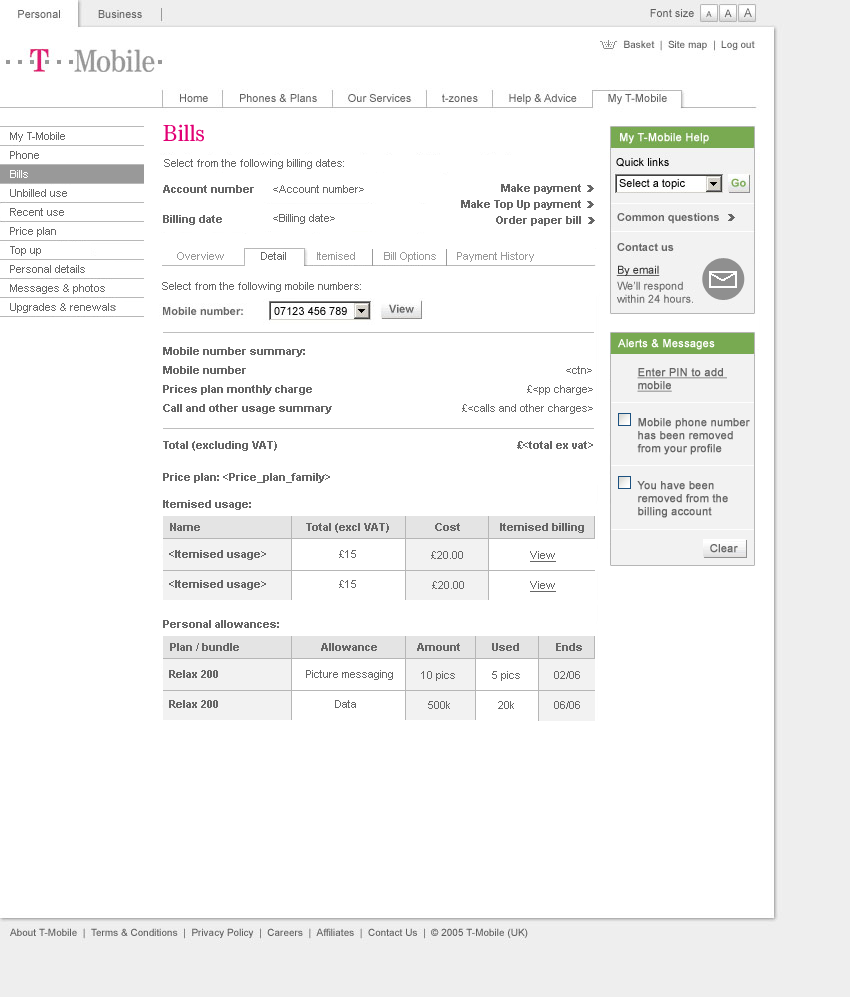
<style>
.page{position:relative;width:850px;height:997px;background:#ffffff}
.page>*{position:absolute;margin:0}
.t1{font:24px "Tele-Antiqua";color:#e20074}
.t2{font:11px/19px "ArialMT";color:#666666}
.t3{font:11px/19px "ArialMT";color:#ffffff}
.t4{font:11px/19px "ArialMT";color:#8f8f8f;font-weight:bold}
.t5{font:11px "ArialMT";color:#666666}
.t6{font:11px "Arial-BoldMT";color:#666666}
.t7{font:11px "ArialMT";color:#999999}
.t8{font:11px "ArialMT";color:#ffffff;font-weight:bold}
.t9{font:11px/19px "Arial-BoldMT";color:#666666}
.t10{font:11px "ArialMT";color:#666666;font-weight:bold;text-decoration:underline}
.t11{font:11px "ArialMT";color:#666666;font-weight:bold}
.t12{font:11px "ArialMT";color:#666666;text-decoration:underline}
</style>
<div class="page">
<p class="t1" style="left:163px;top:124px;width:41px;height:18px">Bills</p>
<p class="t2" style="left:10px;top:132px;width:106px;height:181px">My T-Mobile<br>Phone<br><span class="t3">Bills<br></span>Unbilled use<br>Recent use<br>Price plan<br>Top up<br>Personal details<br>Messages &amp; photos<br>Upgrades &amp; renewal<span class="t4">s</span></p>
<p class="t5" style="left:164px;top:159px;width:180px;height:10px">Select from the following billing dates:</p>
<p class="t6" style="left:163px;top:185px;width:91px;height:8px">Account number</p>
<p class="t5" style="left:273px;top:185px;width:91px;height:8px">&lt;Account number&gt;</p>
<p class="t6" style="left:501px;top:184px;width:80px;height:10px">Make payment</p>
<p class="t6" style="left:461px;top:200px;width:120px;height:10px">Make Top Up payment</p>
<p class="t6" style="left:163px;top:215px;width:59px;height:10px">Billing date</p>
<p class="t5" style="left:273px;top:214px;width:62px;height:10px">&lt;Billing date&gt;</p>
<p class="t6" style="left:496px;top:216px;width:85px;height:10px">Order paper bill</p>
<p class="t7" style="left:177px;top:252px;width:47px;height:8px">Overview</p>
<p class="t5" style="left:261px;top:252px;width:25px;height:8px">Detail</p>
<p class="t7" style="left:317px;top:252px;width:38px;height:8px">Itemised</p>
<p class="t7" style="left:384px;top:252px;width:52px;height:10px">Bill Options</p>
<p class="t7" style="left:457px;top:252px;width:77px;height:10px">Payment History</p>
<p class="t5" style="left:162px;top:282px;width:199px;height:10px">Select from the following mobile numbers:</p>
<p class="t8" style="left:618px;top:339px;width:97px;height:11px">Alerts &amp; Messages</p>
<p class="t9" style="left:163px;top:347px;width:169px;height:67px">Mobile number summary:<br>Mobile number <br>Prices plan monthly charge<br>Call and other usage summary</p>
<p class="t5" style="left:566px;top:366px;width:26px;height:8px">&lt;ctn&gt;</p>
<p class="t10" style="left:637px;top:368px;width:90px;height:24px">Enter PIN to add <br>mobile</p>
<p class="t5" style="left:527px;top:385px;width:66px;height:10px">£&lt;pp charge&gt;</p>
<p class="t5" style="left:462px;top:404px;width:131px;height:10px">£&lt;calls and other charges&gt;</p>
<p class="t11" style="left:637px;top:418px;width:113px;height:37px">Mobile phone number <br>has been removed <br>from your profile</p>
<p class="t6" style="left:163px;top:441px;width:114px;height:10px">Total (excluding VAT)</p>
<p class="t6" style="left:517px;top:441px;width:76px;height:8px"><span class="t5"> </span>£&lt;total ex vat&gt;</p>
<p class="t6" style="left:163px;top:473px;width:167px;height:10px">Price plan: &lt;Price_plan_family&gt;</p>
<p class="t11" style="left:637px;top:481px;width:91px;height:37px">You have been <br>removed from the <br>billing account</p>
<p class="t6" style="left:163px;top:500px;width:88px;height:10px">Itemised usage:</p>
<p class="t6" style="left:170px;top:523px;width:30px;height:8px">Name</p>
<p class="t6" style="left:306px;top:523px;width:83px;height:10px">Total (excl VAT)</p>
<p class="t6" style="left:435px;top:523px;width:25px;height:8px">Cost</p>
<p class="t6" style="left:500px;top:523px;width:84px;height:10px">Itemised billing</p>
<p class="t11" style="left:710px;top:544px;width:28px;height:9px">Clear</p>
<p class="t6" style="left:169px;top:550px;width:97px;height:10px">&lt;Itemised usage&gt;</p>
<p class="t5" style="left:339px;top:550px;width:17px;height:8px">£15</p>
<p class="t5" style="left:431px;top:551px;width:32px;height:8px">£20.00</p>
<p class="t12" style="left:530px;top:551px;width:26px;height:11px">View</p>
<p class="t6" style="left:169px;top:580px;width:97px;height:10px">&lt;Itemised usage&gt;</p>
<p class="t5" style="left:339px;top:580px;width:17px;height:8px">£15</p>
<p class="t5" style="left:432px;top:581px;width:32px;height:8px">£20.00</p>
<p class="t12" style="left:530px;top:581px;width:26px;height:11px">View</p>
<p class="t6" style="left:163px;top:620px;width:116px;height:8px">Personal allowances:</p>
<p class="t6" style="left:170px;top:643px;width:69px;height:8px">Plan / bundle</p>
<p class="t6" style="left:321px;top:643px;width:56px;height:8px">Allowance</p>
<p class="t6" style="left:417px;top:643px;width:43px;height:8px">Amount</p>
<p class="t6" style="left:492px;top:643px;width:27px;height:8px">Used</p>
<p class="t6" style="left:556px;top:643px;width:26px;height:8px">Ends</p>
<p class="t6" style="left:169px;top:670px;width:49px;height:8px">Relax 200</p>
<p class="t5" style="left:306px;top:670px;width:87px;height:10px">Picture messaging</p>
<p class="t5" style="left:421px;top:671px;width:34px;height:10px">10 pics</p>
<p class="t5" style="left:492px;top:671px;width:28px;height:10px">5 pics</p>
<p class="t5" style="left:554px;top:671px;width:26px;height:8px">02/06</p>
<p class="t6" style="left:169px;top:700px;width:49px;height:8px">Relax 200</p>
<p class="t5" style="left:335px;top:700px;width:21px;height:8px">Data</p>
<p class="t5" style="left:428px;top:701px;width:22px;height:8px">500k</p>
<p class="t5" style="left:498px;top:701px;width:16px;height:8px">20k</p>
<p class="t5" style="left:554px;top:701px;width:26px;height:8px">06/06</p>
</div>
